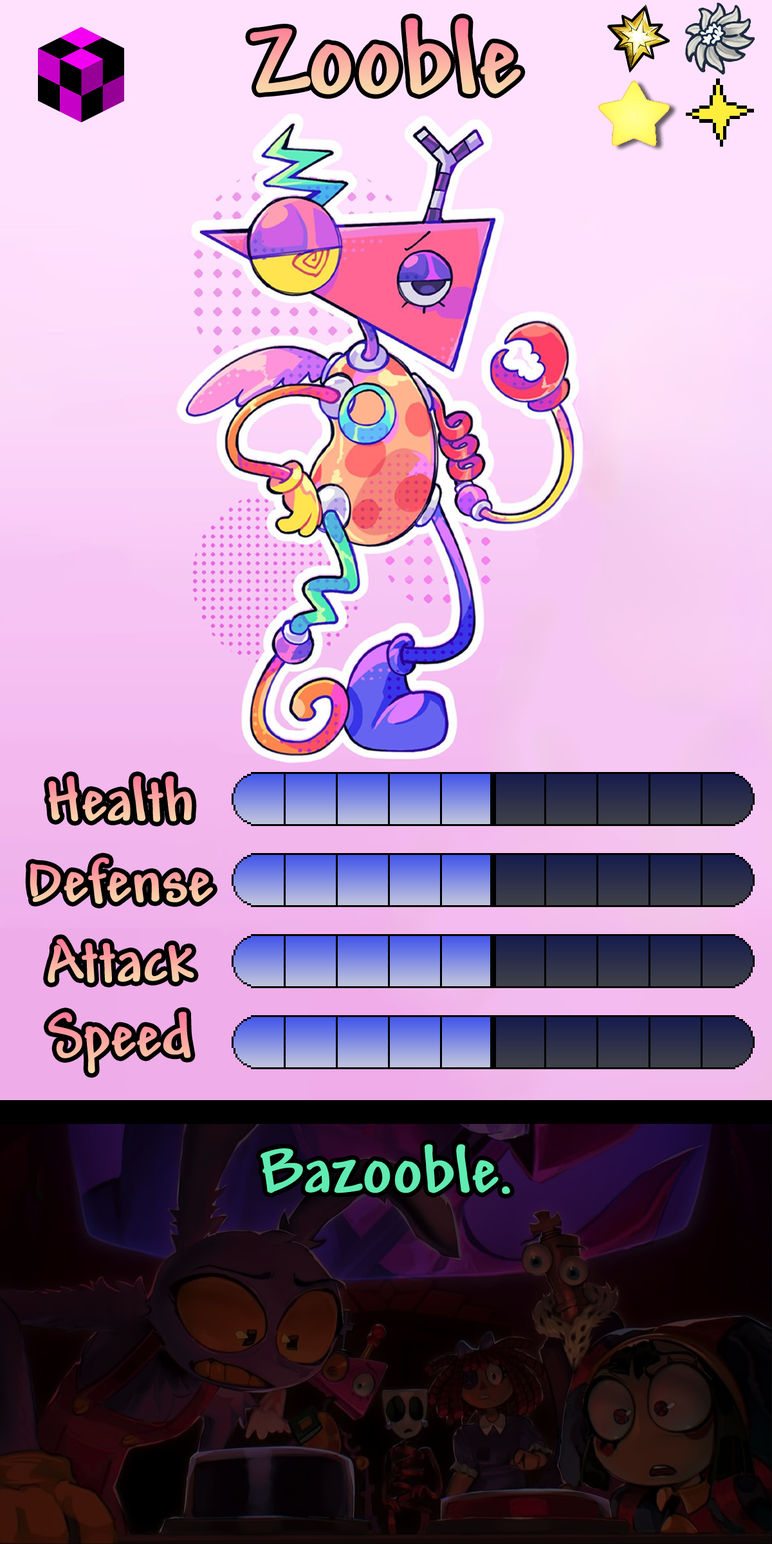
<style>
.page{position:relative;width:772px;height:1544px}
.page>*{position:absolute;margin:0}
.t1{font:108.7px "Andy-Bold"}
.t2{font:64.3px "Andy-Bold"}
.t3{font:69.5px "Andy-Bold";color:#5febb1}
</style>
<div class="page">
<p class="t1" style="left:250px;top:18px;width:271px;height:77px">Zooble</p>
<p class="t2" style="left:48px;top:776px;width:144px;height:46px">Health</p>
<p class="t2" style="left:30px;top:857px;width:183px;height:47px">Defense</p>
<p class="t2" style="left:48px;top:939px;width:146px;height:44px">Attack</p>
<p class="t2" style="left:48px;top:1012px;width:143px;height:62px">Speed</p>
<p class="t3" style="left:261px;top:1144px;width:249px;height:50px">Bazooble.</p>
</div>
